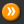
<style>
.page{position:relative;width:24px;height:24px;background:#333333}
.page>*{position:absolute;margin:0}
.t1{font:18px "Arial-BoldMT";letter-spacing:-0.025em;color:#ffffff}
</style>
<div class="page">
<p class="t1" style="left:7px;top:7px;width:9px;height:9px">»</p>
</div>
